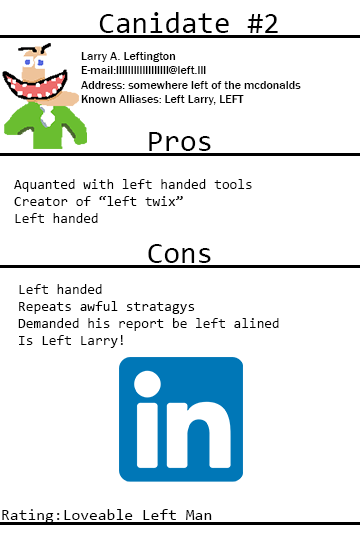
<style>
.page{position:relative;width:360px;height:540px;background:#ffffff}
.page>*{position:absolute;margin:0}
.t1{font:30px "Consolas";color:#000000}
.t2{font:12px "FranklinGothic-Medium";color:#000000}
.t3{font:14px "Consolas";color:#000000}
.t4{font:16px "Consolas";color:#000000}
</style>
<div class="page">
<p class="t1" style="left:99px;top:12px;width:179px;height:21px">Canidate #2</p>
<p class="t2" style="left:81px;top:52px;width:220px;height:53px">Larry A. Leftington<br>E-mail:llllllllllllllllll@left.lll<br>Address: somewhere left of the mcdonalds<br>Known Alliases: Left Larry, LEFT</p>
<p class="t1" style="left:149px;top:132px;width:62px;height:19px">Pros</p>
<p class="t3" style="left:14px;top:179px;width:238px;height:44px">Aquanted with left handed tools<br>Creator of “left twix”<br>Left handed</p>
<p class="t1" style="left:148px;top:244px;width:63px;height:19px">Cons</p>
<p class="t3" style="left:18px;top:284px;width:261px;height:64px">Left handed<br>Repeats awful stratagys<br>Demanded his report be left alined<br>Is Left Larry!</p>
<p class="t4" style="left:2px;top:509px;width:210px;height:14px">Rating:Loveable Left Man</p>
</div>
